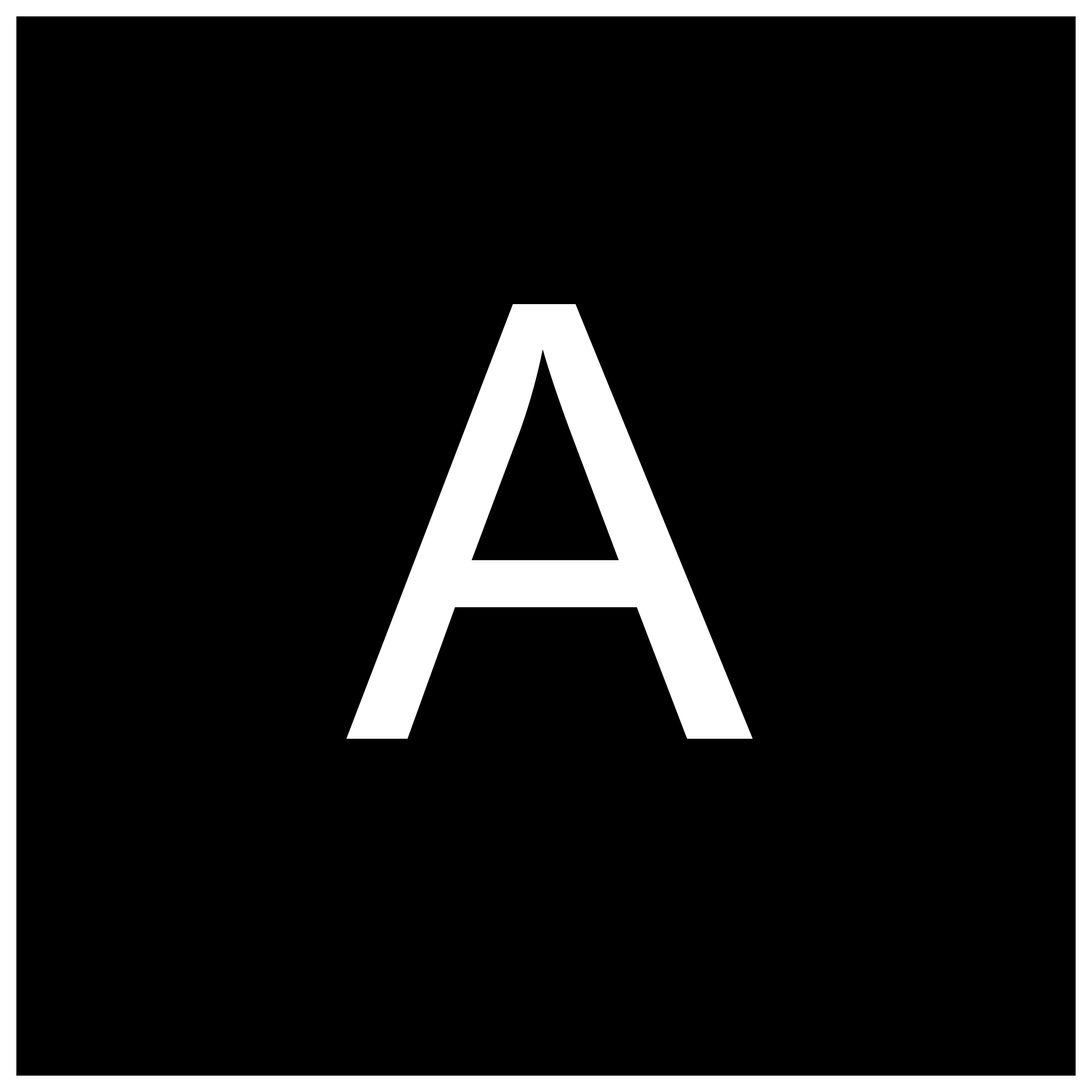
<style>
.page{position:relative;width:1092px;height:1092px;background:#000000}
.page>*{position:absolute;margin:0}
.t1{font:606.7px "ArialMT";color:#ffffff}
</style>
<div class="page">
<p class="t1" style="left:346px;top:304px;width:407px;height:435px">A</p>
</div>
